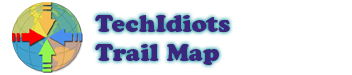
<style>
.page{position:relative;width:352px;height:75px;background:#ffffff}
.page>*{position:absolute;margin:0}
.t1{font:24px "CooperBlackStd";color:#3d277e}
</style>
<div class="page">
<p class="t1" style="left:95px;top:14px;width:135px;height:51px">TechIdiots<br>Trail Map</p>
</div>
